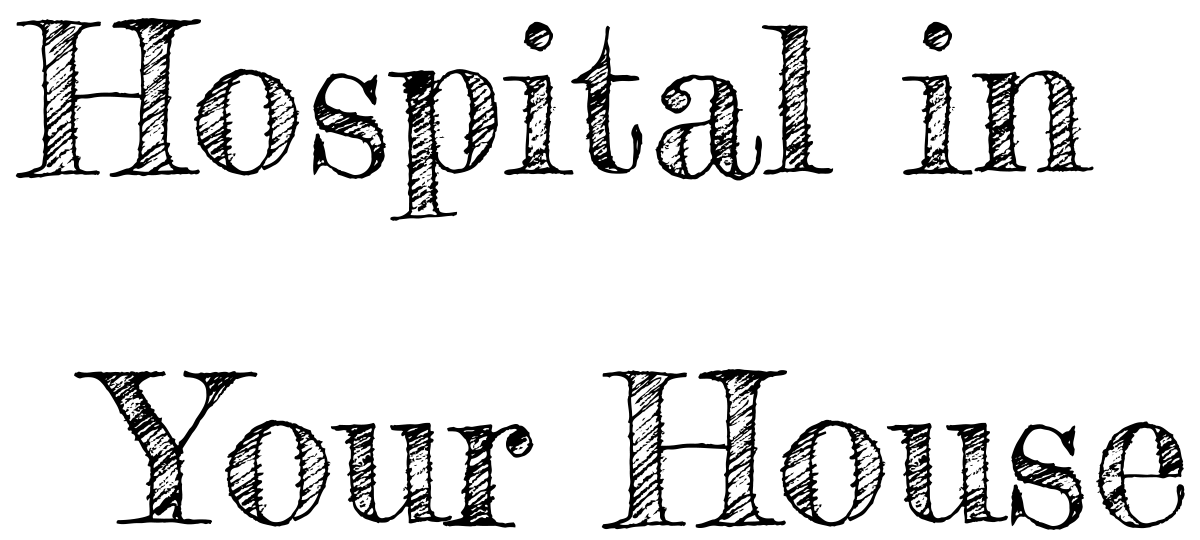
<style>
.page{position:relative;width:1200px;height:540px;background:#ffffff}
.page>*{position:absolute;margin:0}
.t1{font:205px "FrederickatheGreat-Regular";color:#000000}
</style>
<div class="page">
<p class="t1" style="left:15px;top:18px;width:1079px;height:203px">Hospital in</p>
<p class="t1" style="left:74px;top:369px;width:1111px;height:161px">Your House</p>
</div>
